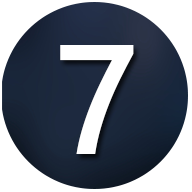
<style>
.page{position:relative;width:192px;height:192px;background:#ffffff}
.page>*{position:absolute;margin:0}
.t1{font:156px "SegoeUI-Semibold";color:#ffffff}
</style>
<div class="page">
<p class="t1" style="left:60px;top:45px;width:74px;height:109px">7</p>
</div>
